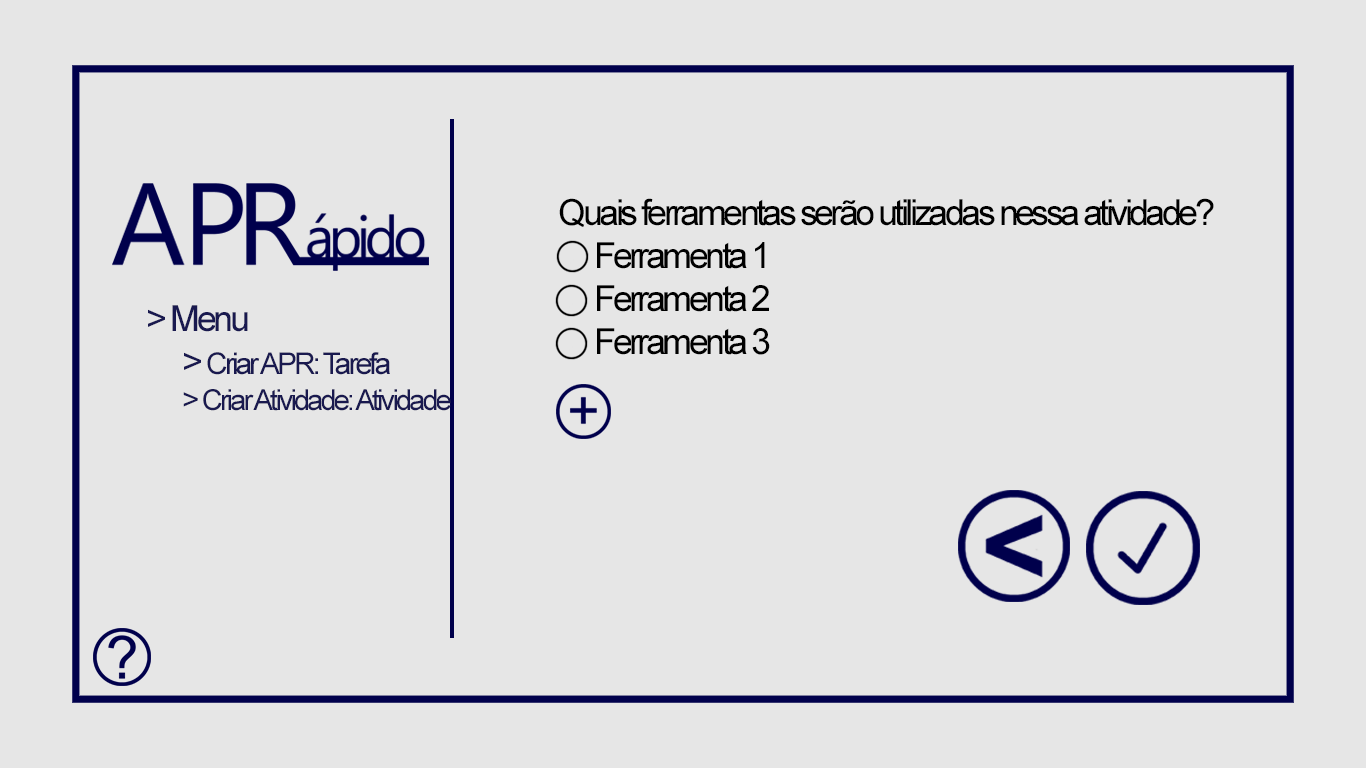
<style>
.page{position:relative;width:1366px;height:768px;background:#e6e6e6}
.page>*{position:absolute;margin:0}
.t1{font:36px "ArialMT";letter-spacing:-0.1em;color:#000000}
.t2{font:29px "ArialMT";letter-spacing:-0.1em;color:#19194f}
.t3{font:36px "ArialMT";letter-spacing:-0.095em;color:#19194f}
.t4{font:30px "ArialMT";letter-spacing:-0.1em;color:#19194f}
</style>
<div class="page">
<p class="t1" style="left:559px;top:198px;width:655px;height:157px">Quais ferramentas serão utilizadas nessa atividade?<br> Ferramenta 1<br> Ferramenta 2<br> Ferramenta 3</p>
<p class="t2" style="left:148px;top:305px;width:303px;height:106px"><span class="t3">&gt; Menu<br> &gt; </span><span class="t4">Criar APR: Tarefa<br> &gt; </span>Criar Atividade: Atividade</p>
</div>
